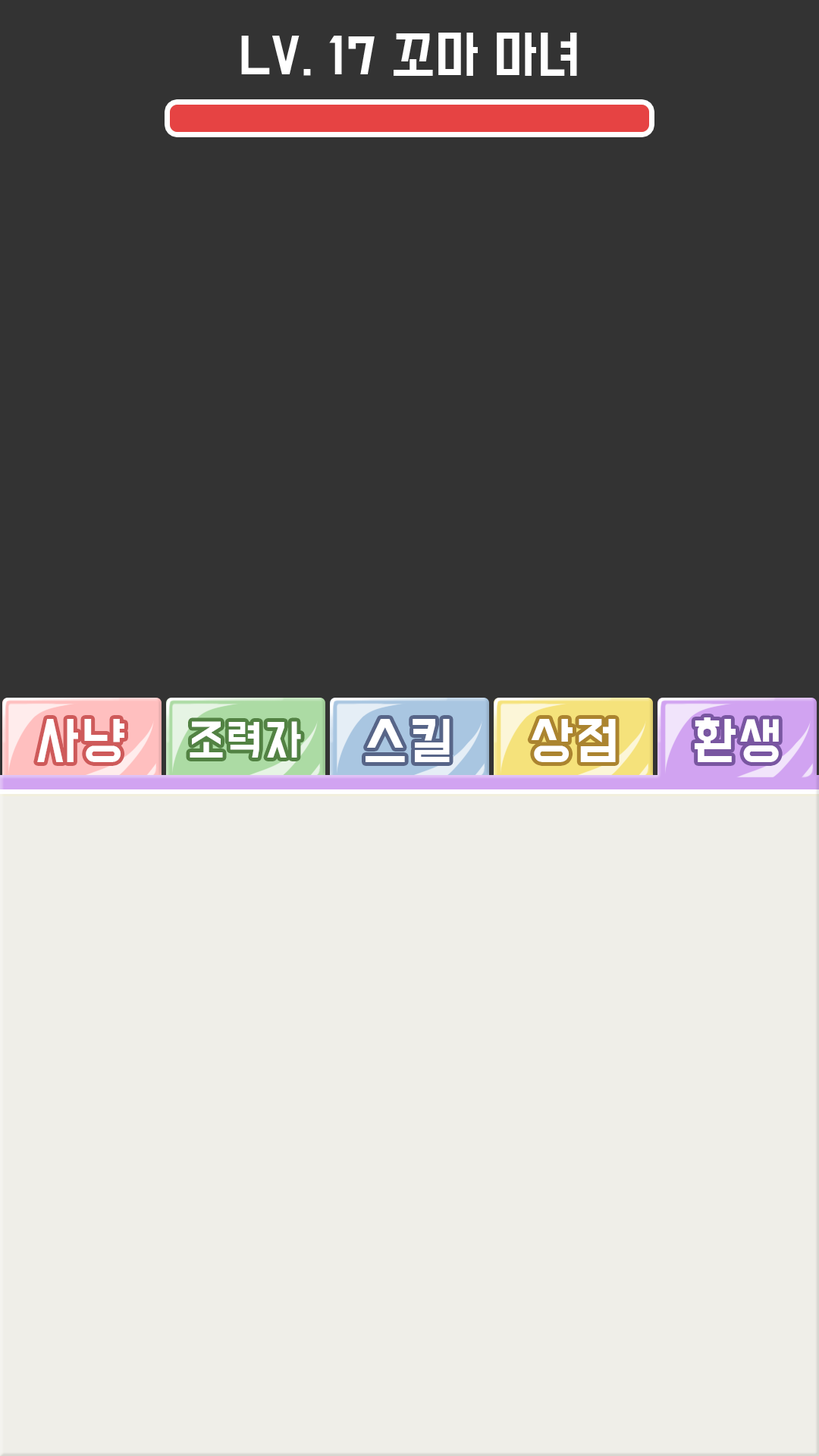
<style>
.page{position:relative;width:819px;height:1456px;background:#333333}
.page>*{position:absolute;margin:0}
.t1{font:45.5px "BMDoHyeon";color:#ffffff}
.t2{font:45.5px "BMDoHyeon";letter-spacing:0.05em;color:#ffffff}
.t3{font:37.9px "BMDoHyeon";letter-spacing:0.05em;color:#ffffff}
</style>
<div class="page">
<p class="t1" style="left:241px;top:33px;width:336px;height:43px">LV. 17 꼬마 마녀</p>
<p class="t2" style="left:37px;top:719px;width:87px;height:43px">사냥</p>
<p class="t3" style="left:190px;top:721px;width:111px;height:37px">조력자</p>
<p class="t2" style="left:366px;top:719px;width:84px;height:43px">스킬</p>
<p class="t2" style="left:531px;top:719px;width:85px;height:43px">상점</p>
<p class="t2" style="left:695px;top:717px;width:84px;height:45px">환생</p>
</div>
